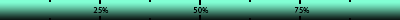
<style>
.page{position:relative;width:400px;height:20px}
.page>*{position:absolute;margin:0}
.t1{font:8px "MyriadHebrew-Regular";color:#000000}
</style>
<div class="page">
<p class="t1" style="left:93px;top:7px;width:16px;height:6px">25%</p>
<p class="t1" style="left:193px;top:7px;width:16px;height:6px">50%</p>
<p class="t1" style="left:294px;top:7px;width:16px;height:6px">75%</p>
</div>
